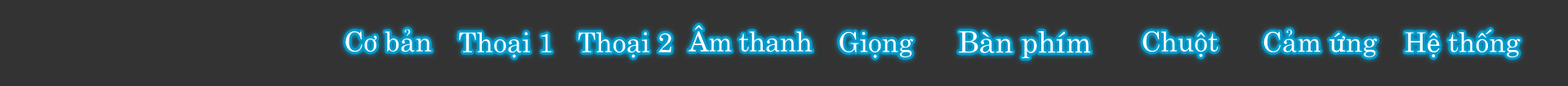
<style>
.page{position:relative;width:1568px;height:86px;background:#333333}
.page>*{position:absolute;margin:0}
.t1{font:27.3px "UTM-Centur";color:#ffffff}
.t2{font:27.3px "UTM-Centur";letter-spacing:-0.02em;color:#ffffff}
.t3{font:29.4px "UTM-Centur";color:#ffffff}
</style>
<div class="page">
<p class="t1" style="left:345px;top:29px;width:87px;height:23px">Cơ bản</p>
<p class="t2" style="left:688px;top:25px;width:125px;height:27px">Âm thanh</p>
<p class="t1" style="left:1263px;top:29px;width:114px;height:28px">Cảm ứng</p>
<p class="t1" style="left:1405px;top:29px;width:116px;height:29px">Hệ thống</p>
<p class="t1" style="left:459px;top:32px;width:93px;height:26px">Thoại 1</p>
<p class="t1" style="left:578px;top:32px;width:93px;height:26px">Thoại 2</p>
<p class="t1" style="left:840px;top:31px;width:73px;height:27px">Giọng</p>
<p class="t3" style="left:959px;top:31px;width:132px;height:27px">Bàn phím</p>
<p class="t1" style="left:1143px;top:31px;width:75px;height:26px">Chuột</p>
</div>
